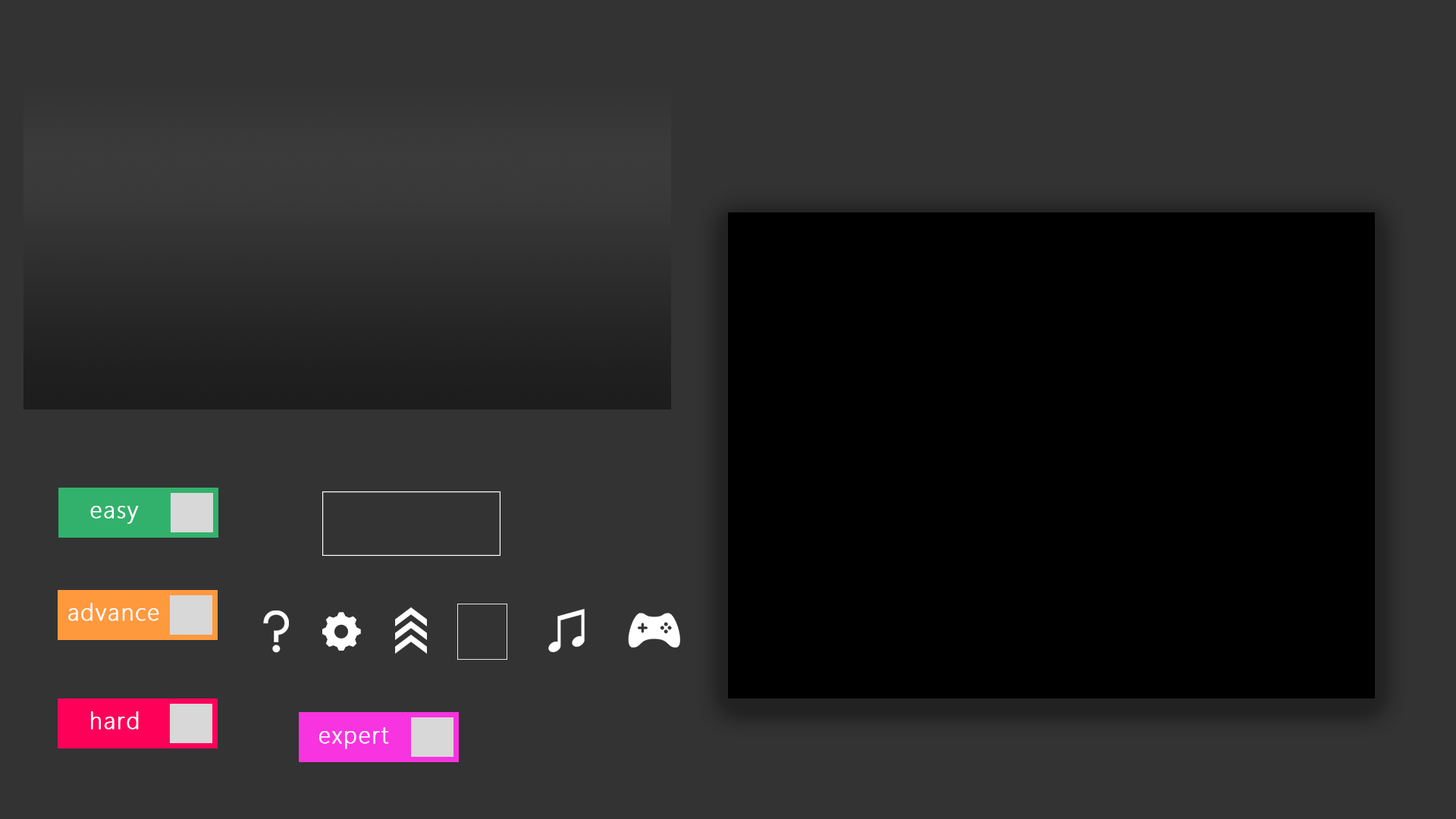
<style>
.page{position:relative;width:1456px;height:819px;background:#333333}
.page>*{position:absolute;margin:0}
.t1{font:23.2px "SegoeUI-Light";letter-spacing:0.05em;color:#ffffff;font-weight:bold}
</style>
<div class="page">
<p class="t1" style="left:90px;top:506px;width:49px;height:18px">easy</p>
<p class="t1" style="left:68px;top:603px;width:91px;height:18px">advance</p>
<p class="t1" style="left:91px;top:711px;width:48px;height:19px">hard</p>
<p class="t1" style="left:318px;top:727px;width:71px;height:22px">expert</p>
</div>
